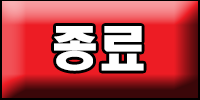
<style>
.page{position:relative;width:200px;height:100px}
.page>*{position:absolute;margin:0}
.t1{font:48px "HeadlineR-HM";color:#ffffff}
</style>
<div class="page">
<p class="t1" style="left:54px;top:26px;width:90px;height:45px">종료</p>
</div>
